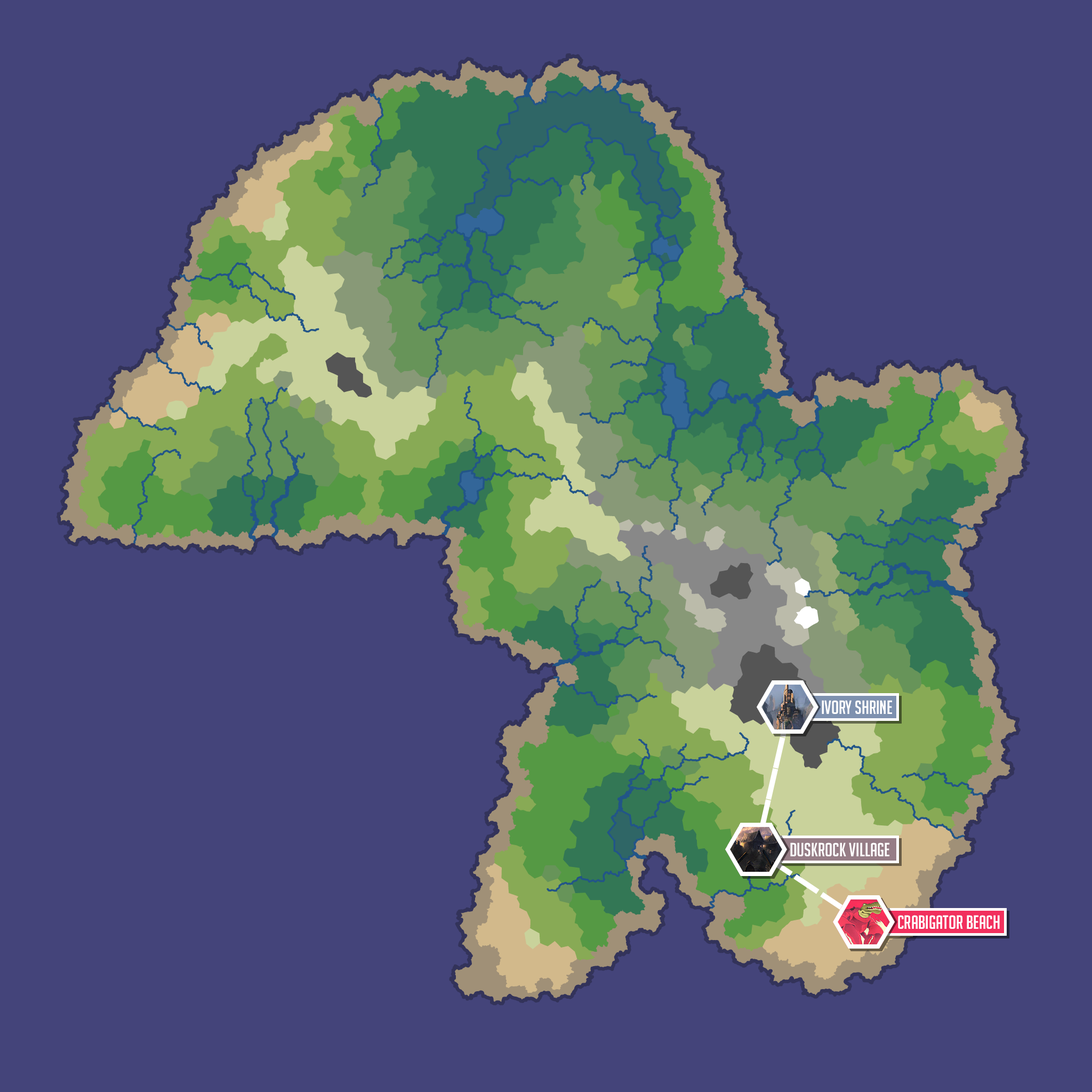
<style>
.page{position:relative;width:1092px;height:1092px;background:#44447a}
.page>*{position:absolute;margin:0}
.t1{font:32px "BigNoodleTitling";color:#ffffff}
</style>
<div class="page">
<p class="t1" style="left:822px;top:700px;width:70px;height:14px">ivory shrine</p>
<p class="t1" style="left:790px;top:842px;width:99px;height:14px">Duskrock village</p>
<p class="t1" style="left:898px;top:915px;width:102px;height:14px">Crabigator beach</p>
</div>
